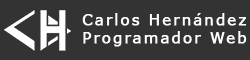
<style>
.page{position:relative;width:250px;height:60px;background:#333333}
.page>*{position:absolute;margin:0}
.t1{font:15.2px "MSReferenceSansSerif";letter-spacing:0.1em;color:#fffefe;font-weight:bold}
</style>
<div class="page">
<p class="t1" style="left:82px;top:13px;width:165px;height:34px">Carlos Hernández<br>Programador Web</p>
</div>
